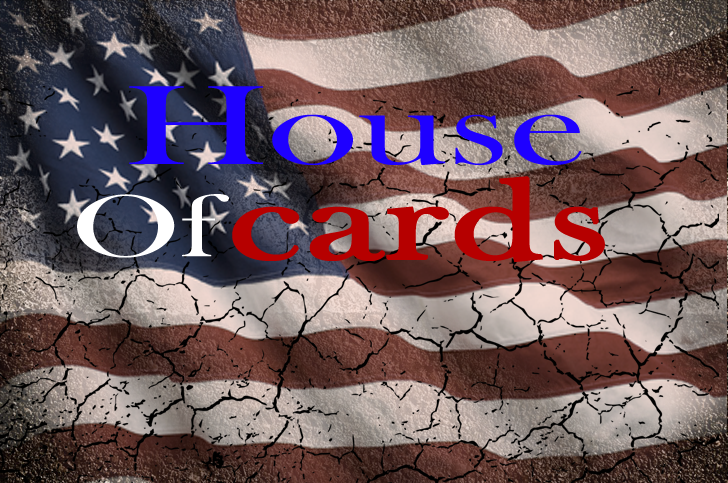
<style>
.page{position:relative;width:728px;height:483px}
.page>*{position:absolute;margin:0}
.t1{font:116.7px "BaskOldFace";color:#1e00ff;scale:1.5 1}
.t2{font:116.7px "BaskOldFace";color:#b60000;font-weight:bold;scale:1.5 1}
.t3{font:90px "BaskOldFace";color:#ffffff;scale:1.5 1}
</style>
<div class="page">
<p class="t1" style="left:129px;top:86px;width:453px;height:79px">House</p>
<p class="t2" style="left:232px;top:176px;width:373px;height:87px">cards</p>
<p class="t3" style="left:77px;top:194px;width:152px;height:64px">Of</p>
</div>
